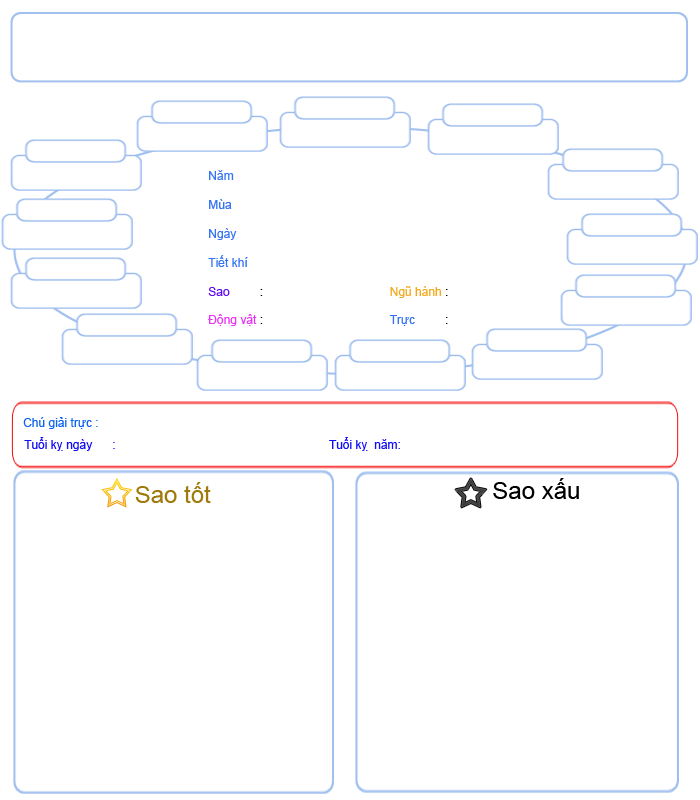
<style>
.page{position:relative;width:700px;height:800px;background:#ffffff}
.page>*{position:absolute;margin:0}
.t1{font:12px "ArialMT";color:#3474f3}
.t2{font:12px "ArialMT";color:#620cf1}
.t3{font:12px "ArialMT";color:#000000}
.t4{font:12px "ArialMT";color:#f2a91c}
.t5{font:12px "ArialMT";color:#e835f3}
.t6{font:12px "ArialMT";color:#0d62ef}
.t7{font:12px "ArialMT";color:#120df8}
.t8{font:24px "ArialMT";color:#9f7a0b}
.t9{font:24px "ArialMT";color:#000000}
</style>
<div class="page">
<p class="t1" style="left:208px;top:170px;width:240px;height:156px">Năm  <br><br>Mùa      <br><br>Ngày     <br><br>Tiết khí   <br><span class="t2"><br>Sao</span><span class="t3">         :                                      </span><span class="t4">Ngũ hành </span><span class="t3">: <br></span><span class="t5"><br>Động vật</span><span class="t3"> :                                      </span>Trực<span class="t3">         :</span></p>
<p class="t6" style="left:23px;top:417px;width:75px;height:12px">Chú giải trực :</p>
<p class="t7" style="left:24px;top:437px;width:376px;height:14px">Tuổi kỵ ngày      :                                                                Tuổi kỵ  năm:</p>
<p class="t8" style="left:135px;top:482px;width:76px;height:21px">Sao tốt</p>
<p class="t9" style="left:493px;top:478px;width:86px;height:21px">Sao xấu</p>
</div>
